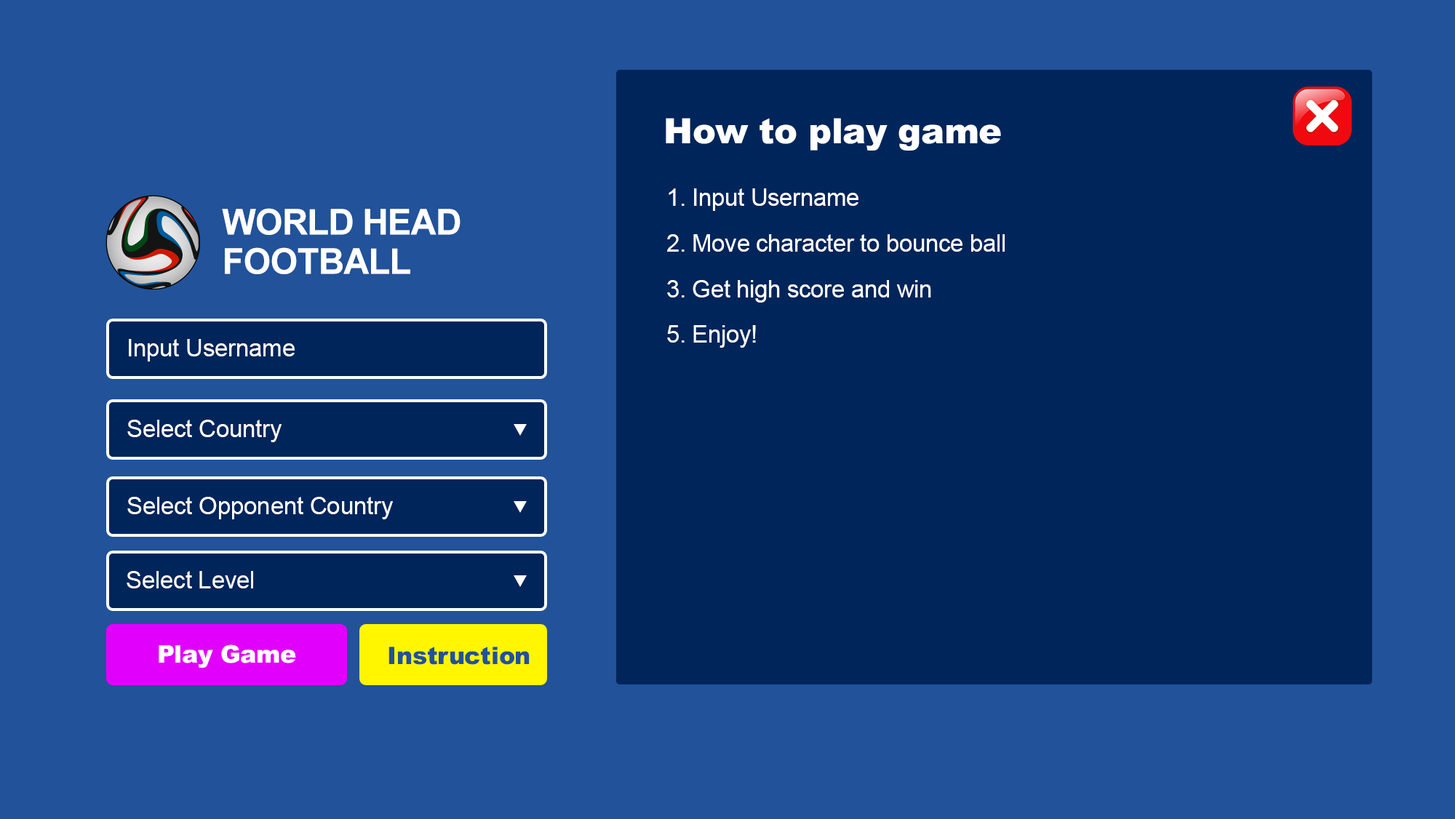
<style>
.page{position:relative;width:1455px;height:819px;background:#21529a}
.page>*{position:absolute;margin:0}
.t1{font:35px "Arial-Black";letter-spacing:-0.01em;color:#ffffff}
.t2{font:24px/45.5px "ArialMT";letter-spacing:-0.01em;color:#ffffff}
.t3{font:35.7px/39.3px "Arial-BoldMT";letter-spacing:-0.02em;color:#ffffff;text-transform:uppercase}
.t4{font:24.2px "ArialMT";letter-spacing:-0.01em;color:#ffffff}
.t5{font:24.2px "Arial-Black";letter-spacing:-0.01em;color:#ffffff}
.t6{font:24.2px "Arial-Black";letter-spacing:-0.01em;color:#21529a}
</style>
<div class="page">
<p class="t1" style="left:666px;top:118px;width:335px;height:33px">How to play game</p>
<p class="t2" style="left:667px;top:188px;width:338px;height:160px">1. Input Username<br>2. Move character to bounce ball<br>3. Get high score and win<br>5. Enjoy!</p>
<p class="t3" style="left:222px;top:208px;width:239px;height:66px">World Head<br>Football</p>
<p class="t4" style="left:129px;top:339px;width:166px;height:23px">Input Username</p>
<p class="t4" style="left:127px;top:420px;width:155px;height:22px">Select Country</p>
<p class="t4" style="left:127px;top:497px;width:266px;height:23px">Select Opponent Country</p>
<p class="t4" style="left:127px;top:571px;width:126px;height:18px">Select Level</p>
<p class="t5" style="left:159px;top:645px;width:137px;height:23px">Play Game</p>
<p class="t6" style="left:389px;top:647px;width:141px;height:18px">Instruction</p>
</div>
